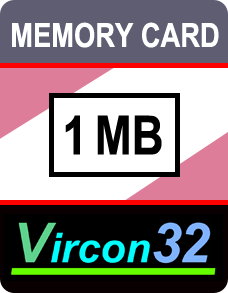
<style>
.page{position:relative;width:228px;height:293px;background:#ffffff}
.page>*{position:absolute;margin:0}
.t1{font:33.3px "ArialNarrow-Bold";color:#ffffff}
.t2{font:54.2px "ArialNarrow-Bold";color:#000000}
</style>
<div class="page">
<p class="t1" style="left:12px;top:22px;width:207px;height:26px">MEMORY CARD</p>
<p class="t2" style="left:65px;top:115px;width:97px;height:40px">1 MB</p>
</div>
